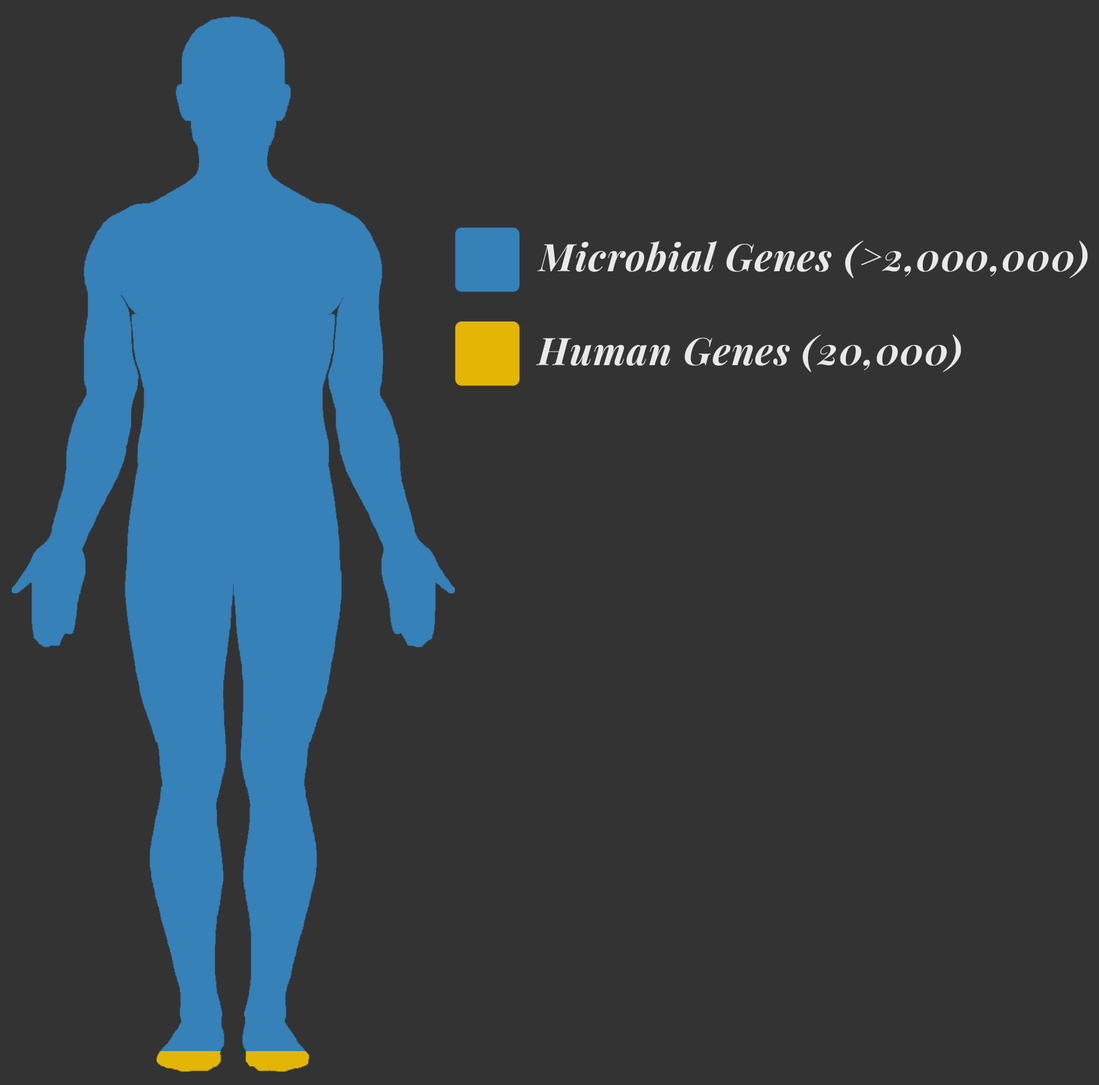
<style>
.page{position:relative;width:1099px;height:1085px;background:#333333}
.page>*{position:absolute;margin:0}
.t1{font:38.1px "PlayfairDisplay-BoldItalic";letter-spacing:0.025em;color:#e9e9e9}
</style>
<div class="page">
<p class="t1" style="left:537px;top:241px;width:550px;height:38px">Microbial Genes (&gt;2,000,000)</p>
<p class="t1" style="left:536px;top:335px;width:425px;height:37px">Human Genes (20,000)</p>
</div>
